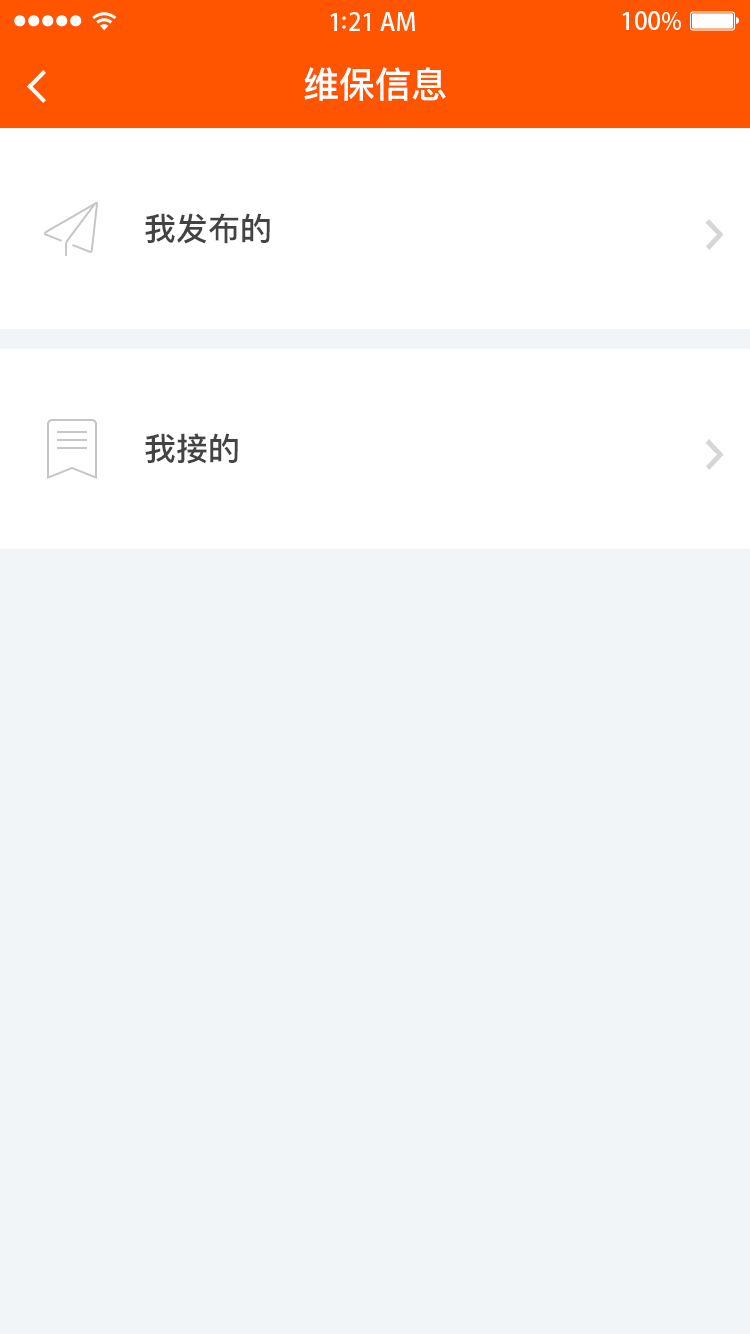
<style>
.page{position:relative;width:750px;height:1334px;background:#f2f5f7}
.page>*{position:absolute;margin:0}
.t1{font:36px "PingFangSC-Medium";color:#ffffff}
.t2{font:32px "PingFangSC-Medium";color:#434343}
</style>
<div class="page">
<p class="t1" style="left:304px;top:67px;width:142px;height:34px">维保信息</p>
<p class="t2" style="left:145px;top:213px;width:125px;height:31px">我发布的</p>
<p class="t2" style="left:145px;top:433px;width:93px;height:31px">我接的</p>
</div>
